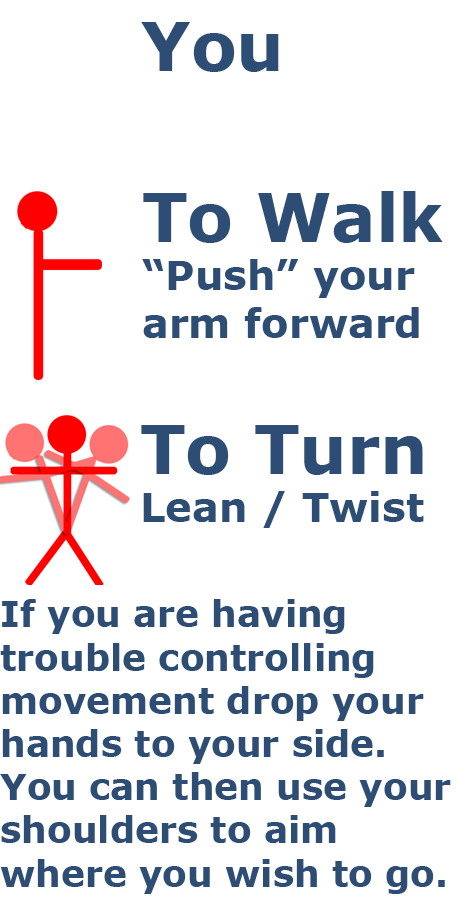
<style>
.page{position:relative;width:459px;height:900px;background:#ffffff}
.page>*{position:absolute;margin:0}
.t1{font:36px "Verdana-Bold";color:#2d4d74}
</style>
<div class="page">
<p class="t1" style="left:0px;top:599px;width:451px;height:295px">If you are having trouble controlling movement drop your hands to your side. You can then use your shoulders to aim where you wish to go. before continuing moving.</p>
</div>
